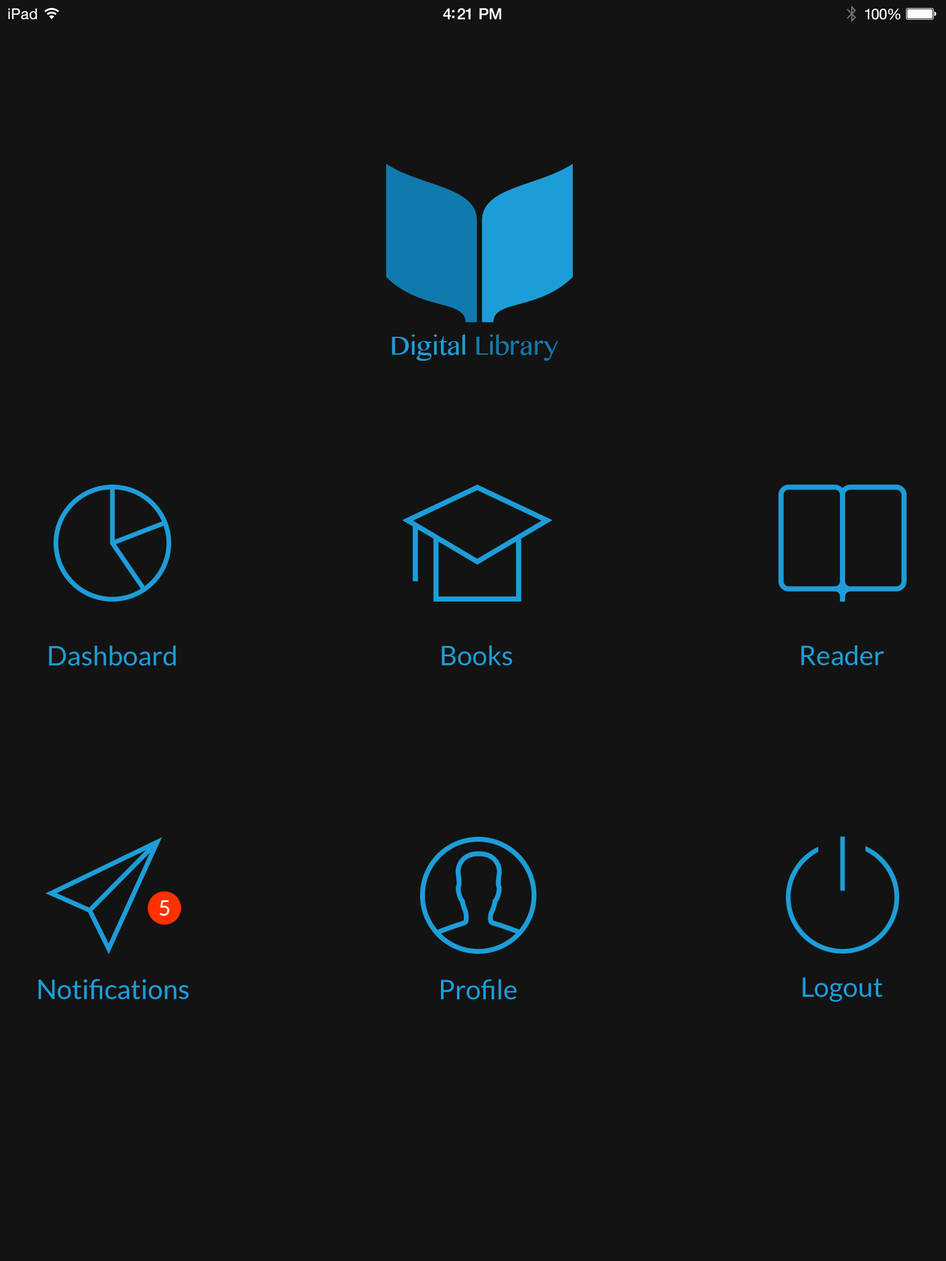
<style>
.page{position:relative;width:946px;height:1261px;background:#131313}
.page>*{position:absolute;margin:0}
.t1{font:14.8px "HelveticaNeue";letter-spacing:0.02em;color:#ffffff}
.t2{font:15.4px "HelveticaNeue-Medium";letter-spacing:-0.02em;color:#ffffff}
.t3{font:14.8px "HelveticaNeue";letter-spacing:-0.02em;color:#ffffff}
.t4{font:27.1px "Lato-Regular";color:#1d9dd8}
.t5{font:21.3px "Lato-Regular";color:#ffffff}
</style>
<div class="page">
<p class="t1" style="left:8px;top:8px;width:29px;height:12px">iPad</p>
<p class="t2" style="left:443px;top:8px;width:58px;height:12px">4:21 PM</p>
<p class="t3" style="left:864px;top:9px;width:36px;height:11px">100%</p>
<p class="t4" style="left:49px;top:645px;width:127px;height:21px">Dashboard</p>
<p class="t4" style="left:441px;top:645px;width:71px;height:21px">Books</p>
<p class="t4" style="left:801px;top:645px;width:83px;height:21px">Reader</p>
<p class="t5" style="left:159px;top:900px;width:10px;height:16px">5</p>
<p class="t4" style="left:802px;top:977px;width:80px;height:25px">Logout</p>
<p class="t4" style="left:38px;top:979px;width:151px;height:20px">Notifications</p>
<p class="t4" style="left:441px;top:979px;width:76px;height:21px">Profile</p>
</div>
